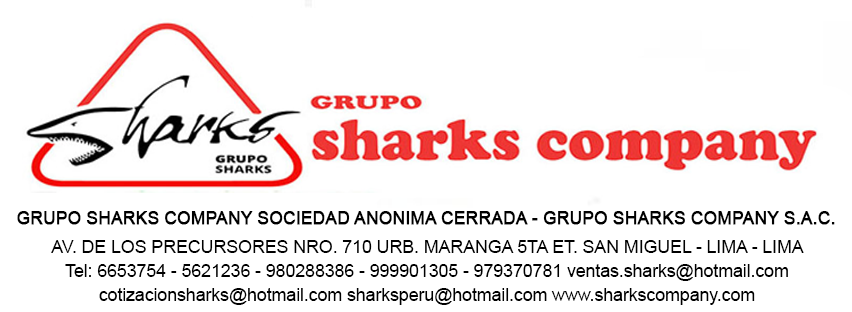
<style>
.page{position:relative;width:852px;height:312px;background:#ffffff}
.page>*{position:absolute;margin:0}
.t1{font:18px "ArialMT";letter-spacing:-0.01em;color:#000000;font-weight:bold;scale:0.96 1}
.t2{font:18px/24px "ArialMT";letter-spacing:-0.01em;color:#000000}
</style>
<div class="page">
<p class="t1" style="left:17px;top:211px;width:818px;height:14px">GRUPO SHARKS COMPANY SOCIEDAD ANONIMA CERRADA - GRUPO SHARKS COMPANY S.A.C.</p>
<p class="t2" style="left:51px;top:240px;width:753px;height:65px;text-align:center">AV. DE LOS PRECURSORES NRO. 710 URB. MARANGA 5TA ET. SAN MIGUEL - LIMA - LIMA<br>Tel: 6653754 - 5621236 - 980288386 - 999901305 - 979370781 ventas.sharks@hotmail.com<br>cotizacionsharks@hotmail.com sharksperu@hotmail.com www.sharkscompany.com</p>
</div>
